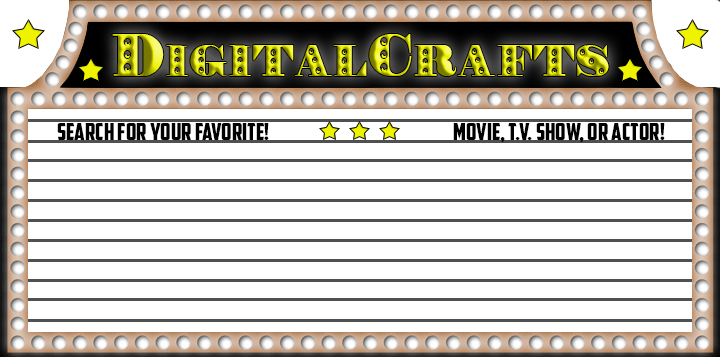
<style>
.page{position:relative;width:720px;height:357px;background:#ffffff}
.page>*{position:absolute;margin:0}
.t1{font:60px "Rechnung-Regular"}
.t2{font:24px "AmericanCaptain";color:#000000}
</style>
<div class="page">
<p class="t1" style="left:112px;top:34px;width:497px;height:42px">DigitalCrafts</p>
<p class="t2" style="left:57px;top:123px;width:212px;height:17px">SEARCH FOR YOUR FAVORITE!</p>
<p class="t2" style="left:453px;top:123px;width:212px;height:19px">MOVIE, T.V. SHOW, OR ACTOR!</p>
</div>
